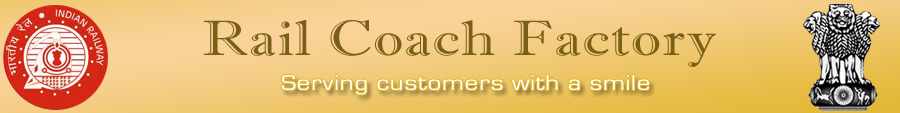
<style>
.page{position:relative;width:900px;height:113px}
.page>*{position:absolute;margin:0}
.t1{font:49.8px "ImprintMT-Shadow";letter-spacing:0.02em;color:#796016;scale:1.2 1}
.t2{font:22.4px "EurostileRegular";letter-spacing:0.02em;color:#ffffff;scale:1.2 1}
</style>
<div class="page">
<p class="t1" style="left:203px;top:20px;width:513px;height:47px">Rail Coach Factory</p>
<p class="t2" style="left:281px;top:75px;width:368px;height:20px">Serving customers with a smile</p>
</div>
